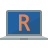
<style>
.page{position:relative;width:48px;height:48px;background:#ffffff}
.page>*{position:absolute;margin:0}
.t1{font:25px "Consolas";color:#ef8341;text-transform:uppercase}
</style>
<div class="page">
<p class="t1" style="left:19px;top:14px;width:11px;height:17px">R</p>
</div>
